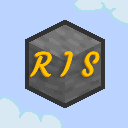
<style>
.page{position:relative;width:128px;height:128px;background:#bad4ff}
.page>*{position:absolute;margin:0}
.t1{font:32px "Courgette-Regular";color:#ffc200}
</style>
<div class="page">
<p class="t1" style="left:29px;top:52px;width:70px;height:26px">R I S</p>
<p class="t1" style="left:30px;top:51px;width:70px;height:26px">R I S</p>
</div>
